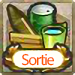
<style>
.page{position:relative;width:75px;height:75px}
.page>*{position:absolute;margin:0}
.t1{font:16px "AdobeClean-Regular";letter-spacing:-0.08em;color:#ff5a00}
</style>
<div class="page">
<p class="t1" style="left:21px;top:53px;width:34px;height:13px">Sortie</p>
</div>
